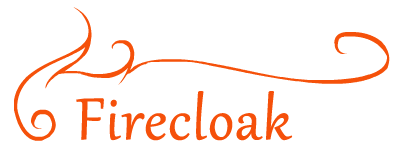
<style>
.page{position:relative;width:400px;height:162px;background:#ffffff}
.page>*{position:absolute;margin:0}
.t1{font:72px "Gabriola";color:#f5500a;font-weight:bold}
</style>
<div class="page">
<p class="t1" style="left:76px;top:91px;width:217px;height:50px">Firecloak</p>
</div>
